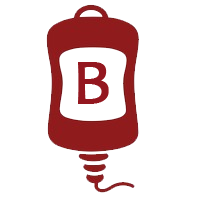
<style>
.page{position:relative;width:200px;height:200px;background:#ffffff}
.page>*{position:absolute;margin:0}
.t1{font:65px "Candara";letter-spacing:0.03em;color:#94171f;font-weight:bold}
</style>
<div class="page">
<p class="t1" style="left:78px;top:62px;width:31px;height:42px">B</p>
</div>
